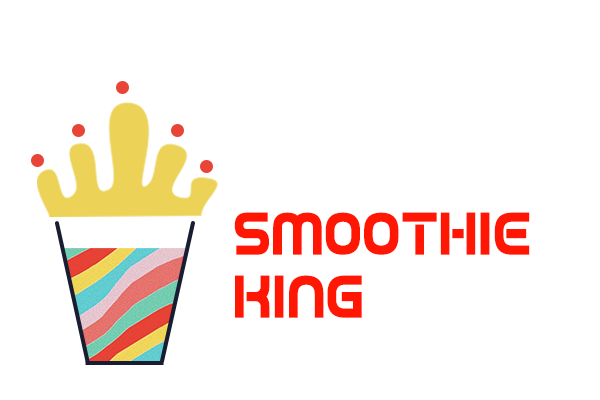
<style>
.page{position:relative;width:600px;height:400px;background:#ffffff}
.page>*{position:absolute;margin:0}
.t1{font:61.3px "GamePlayed";color:#ff1603;scale:0.95 1}
</style>
<div class="page">
<p class="t1" style="left:234px;top:212px;width:296px;height:43px">smoothie</p>
<p class="t1" style="left:235px;top:275px;width:127px;height:43px">king</p>
</div>
